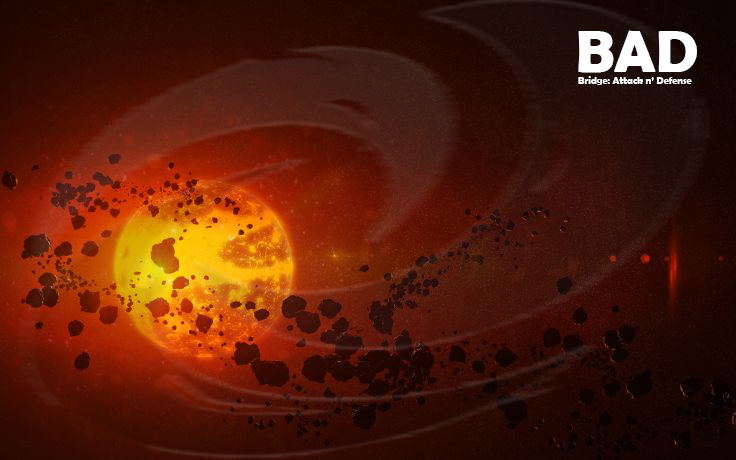
<style>
.page{position:relative;width:736px;height:460px}
.page>*{position:absolute;margin:0}
.t1{font:60px "BerlinSansFBDemi-Bold";color:#ffffff}
.t2{font:10px "BerlinSansFBDemi-Bold";color:#ffffff}
</style>
<div class="page">
<p class="t1" style="left:578px;top:30px;width:119px;height:43px">BAD</p>
<p class="t2" style="left:578px;top:76px;width:114px;height:9px">Bridge: Attack n’ Defense</p>
</div>
